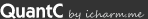
<style>
.page{position:relative;width:148px;height:19px;background:#333333}
.page>*{position:absolute;margin:0}
.t1{font:10px "SegoeScript";color:#dedede}
.t2{font:20px "800-CAI978";color:#ffffff}
</style>
<div class="page">
<p class="t1" style="left:0px;top:3px;width:145px;height:17px"><span class="t2">QuantC </span>by icharm.me</p>
</div>
